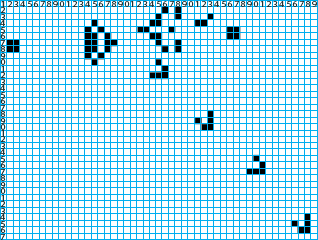
<style>
.page{position:relative;width:318px;height:240px;background:#ffffff}
.page>*{position:absolute;margin:0}
.t1{font:8px "MyriadPro-Regular";letter-spacing:0.14em;color:#243434;scale:1.25 1}
</style>
<div class="page">
<p class="t1" style="left:1px;top:1px;width:64px;height:6px">1234567890</p>
<p class="t1" style="left:66px;top:1px;width:64px;height:6px">1234567890</p>
<p class="t1" style="left:130px;top:1px;width:64px;height:6px">1234567890</p>
<p class="t1" style="left:195px;top:1px;width:64px;height:6px">1234567890</p>
</div>
